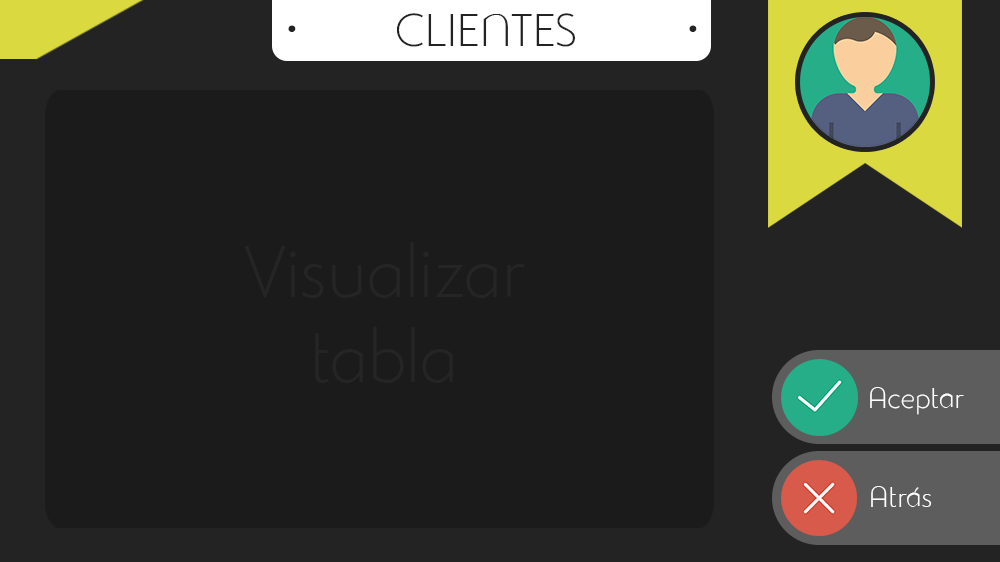
<style>
.page{position:relative;width:1000px;height:562px;background:#1b1b1b}
.page>*{position:absolute;margin:0}
.t1{font:45px "StudioGothicAlternateTrial-Extr";color:#232323}
.t2{font:97px "StudioGothicAlternateTrial-Extr";color:#232323}
.t3{font:71px "StudioGothicAlternateTrial-Extr";color:#252525}
.t4{font:29px "StudioGothicAlternateTrial-Extr";color:#ffffff}
</style>
<div class="page">
<p class="t1" style="left:397px;top:13px;width:178px;height:34px">CLIENTES</p>
<p class="t2" style="left:288px;top:25px;width:409px;height:7px">·                 ·</p>
<p class="t3" style="left:244px;top:242px;width:281px;height:141px;text-align:center">Visualizar<br>tabla</p>
<p class="t4" style="left:870px;top:387px;width:94px;height:28px">Aceptar</p>
<p class="t4" style="left:871px;top:486px;width:61px;height:21px">Atrás</p>
</div>
